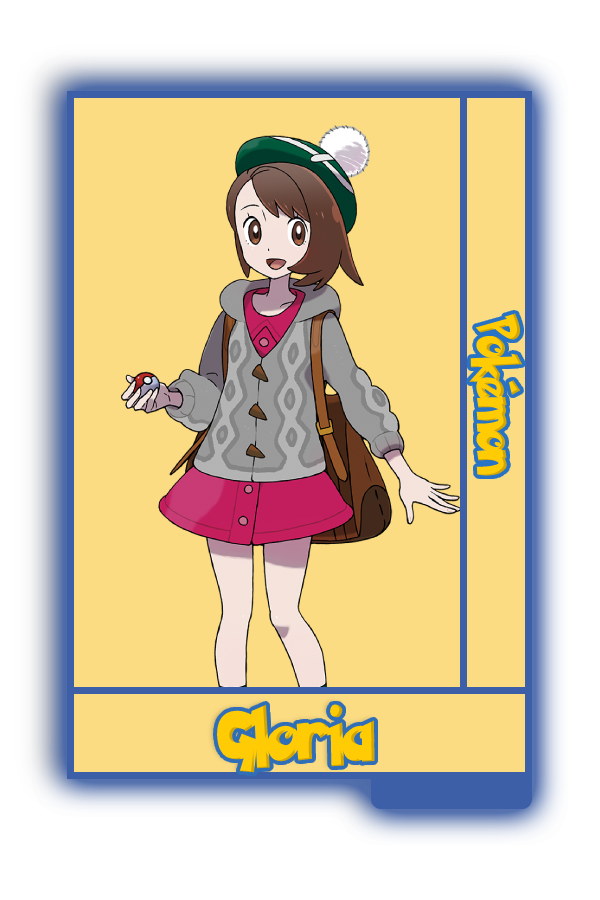
<style>
.page{position:relative;width:600px;height:900px;background:#fbdc83}
.page>*{position:absolute;margin:0}
.t1{font:48.8px "PokemonSolidNormal";color:#ffcb05;scale:0.8 1}
.t2{font:60.1px "PokemonSolidNormal";color:#ffcb05;scale:0.96 1}
</style>
<div class="page">
<p class="t1" style="left:469px;top:313px;width:54px;height:163px;rotate:90deg">Pokémon</p>
<p class="t2" style="left:217px;top:704px;width:158px;height:69px">Gloria</p>
</div>
